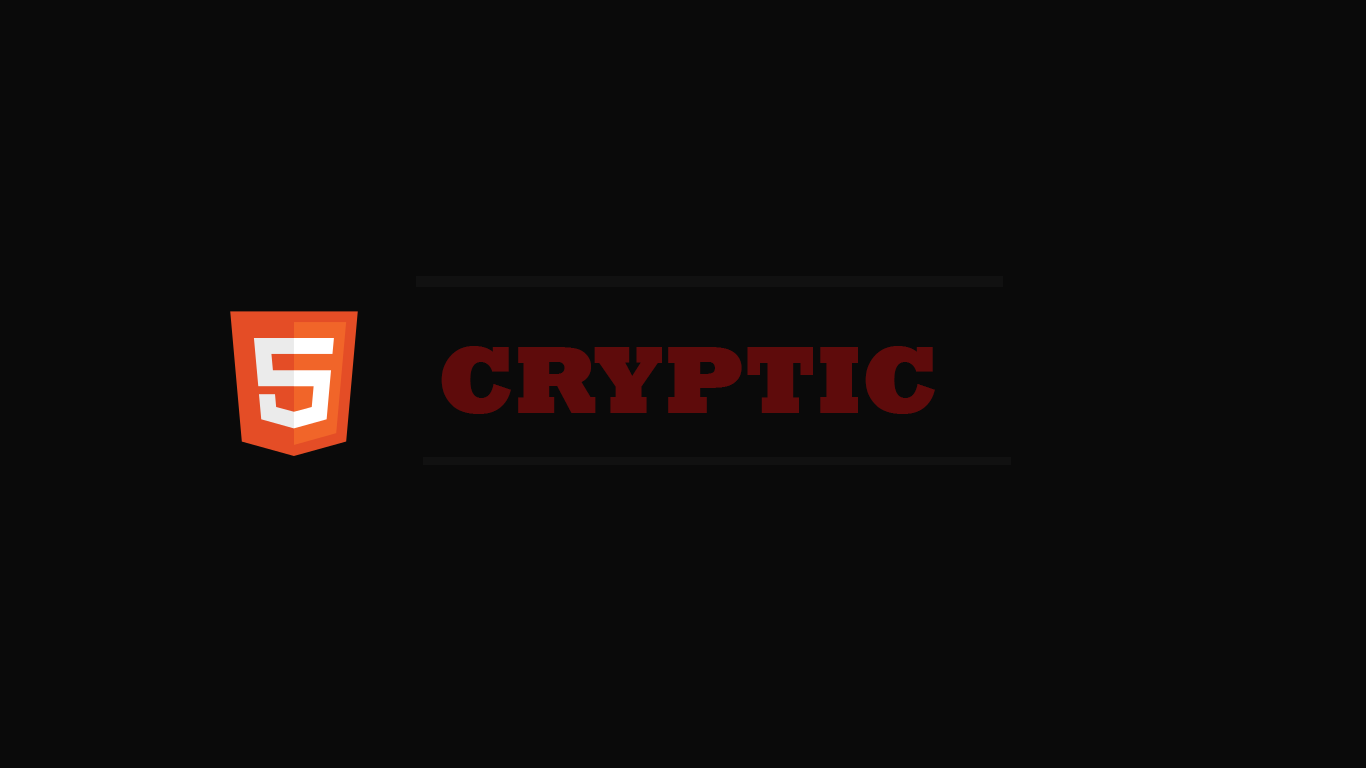
<style>
.page{position:relative;width:1366px;height:768px;background:#0a0a0a}
.page>*{position:absolute;margin:0}
.t1{font:97.1px "Rockwell-ExtraBold";color:#5e0b0b}
</style>
<div class="page">
<p class="t1" style="left:441px;top:346px;width:494px;height:68px">CRYPTIC</p>
</div>
